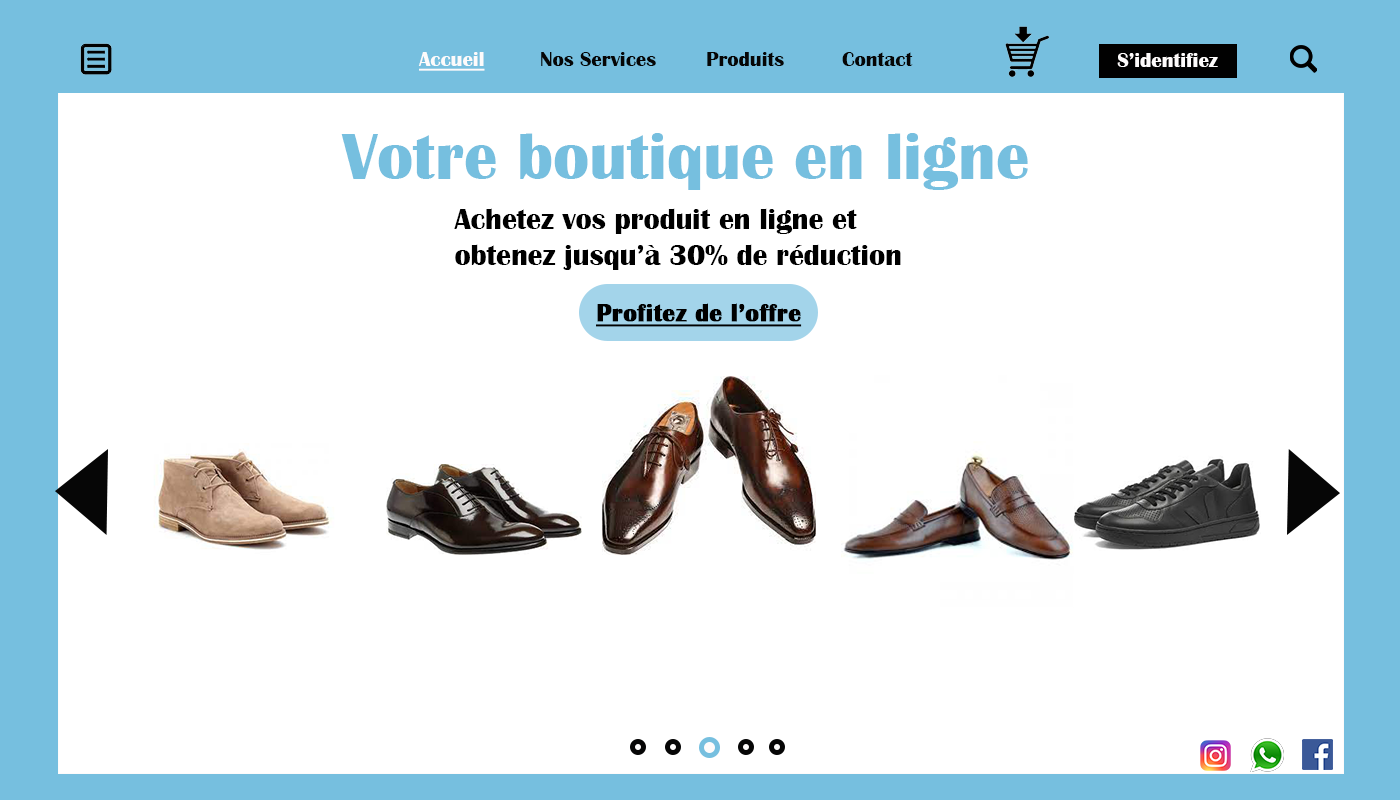
<style>
.page{position:relative;width:1400px;height:800px;background:#ffffff}
.page>*{position:absolute;margin:0}
.t1{font:20.8px "BritannicBold";color:#fdfbfb;text-decoration:underline}
.t2{font:20.8px "BritannicBold";color:#060606}
.t3{font:20.8px "BritannicBold";color:#fdfbfb}
.t4{font:66.7px "BritannicBold";color:#76bfdf}
.t5{font:29.6px "BritannicBold";color:#000000}
.t6{font:25px "BritannicBold";color:#000000;font-weight:bold;text-decoration:underline}
</style>
<div class="page">
<p class="t1" style="left:418px;top:52px;width:67px;height:19px">Accueil</p>
<p class="t2" style="left:541px;top:52px;width:115px;height:14px">Nos Services</p>
<p class="t2" style="left:707px;top:52px;width:77px;height:14px">Produits</p>
<p class="t2" style="left:842px;top:52px;width:71px;height:14px">Contact</p>
<p class="t3" style="left:1117px;top:53px;width:101px;height:14px">S’identifiez</p>
<p class="t4" style="left:341px;top:133px;width:687px;height:57px">Votre boutique en ligne</p>
<p class="t5" style="left:454px;top:208px;width:447px;height:62px">Achetez vos produit en ligne et <br>obtenez jusqu’à 30% de réduction</p>
<p class="t6" style="left:596px;top:303px;width:206px;height:24px">Profitez de l’offre</p>
</div>
